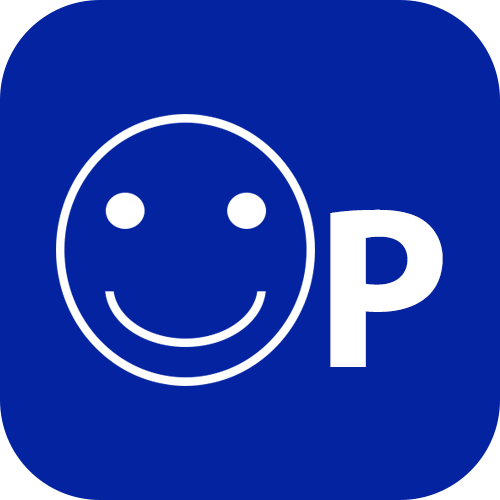
<style>
.page{position:relative;width:500px;height:500px;background:#0323a1}
.page>*{position:absolute;margin:0}
.t1{font:230.9px "MyriadPro-Bold";color:#ffffff}
</style>
<div class="page">
<p class="t1" style="left:330px;top:209px;width:113px;height:158px">P</p>
</div>
